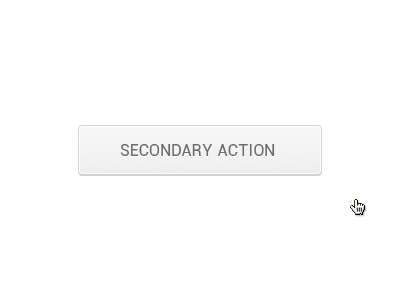
<style>
.page{position:relative;width:400px;height:300px;background:#ffffff}
.page>*{position:absolute;margin:0}
.t1{font:16px "Roboto-Regular";letter-spacing:0.04em;color:#6c6c6c}
</style>
<div class="page">
<p class="t1" style="left:120px;top:144px;width:155px;height:12px">SECONDARY ACTION</p>
</div>
